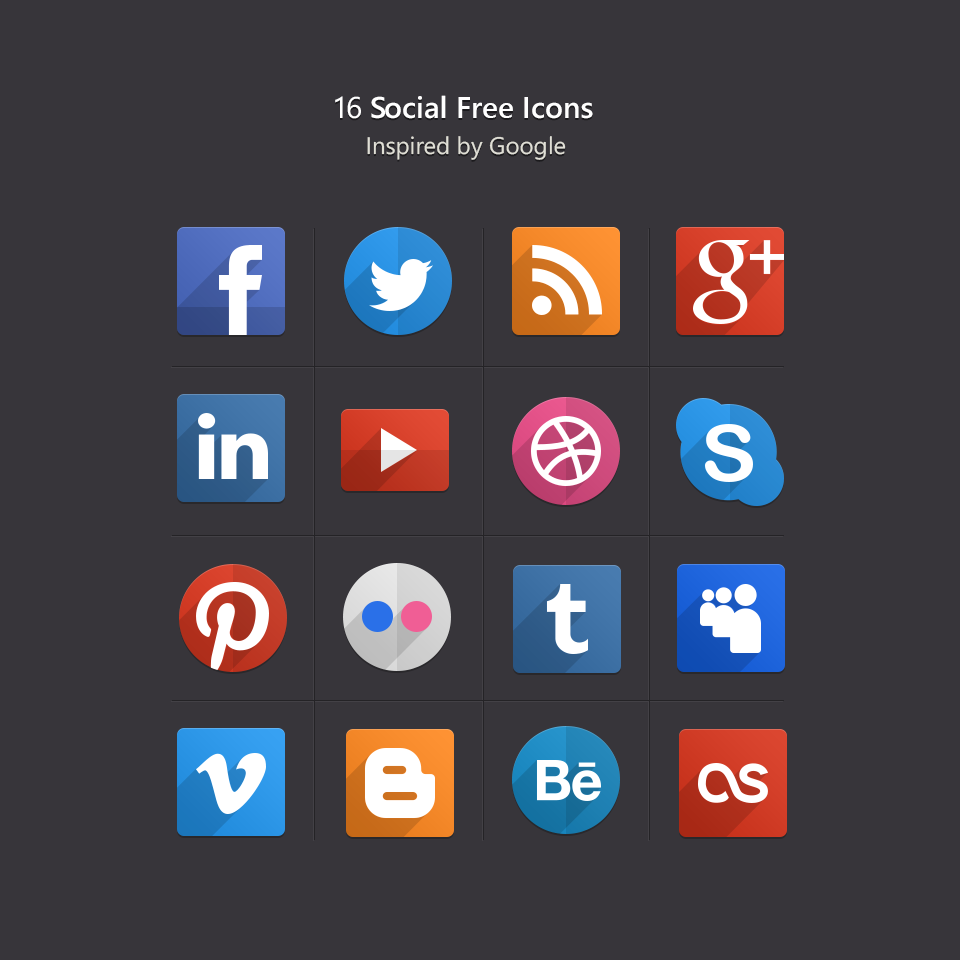
<style>
.page{position:relative;width:960px;height:960px;background:#37353a}
.page>*{position:absolute;margin:0}
.t1{font:24px/36px "SegoeWP";color:#e0dfd6}
.t2{font:30px/36px "SegoeWP";color:#ffffff}
.t3{font:30px/36px "SegoeWP-Semibold";color:#ffffff}
</style>
<div class="page">
<p class="t1" style="left:335px;top:95px;width:258px;height:65px;text-align:center"><span class="t2">16</span><span class="t3"> Social Free Icons<br></span>Inspired by Google</p>
</div>
